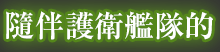
<style>
.page{position:relative;width:220px;height:52px;background:#54861a}
.page>*{position:absolute;margin:0}
.t1{font:30px "RyuminPr6N-Bold";color:#ffffff}
</style>
<div class="page">
<p class="t1" style="left:6px;top:11px;width:207px;height:29px">隨伴護衛艦隊的</p>
</div>
